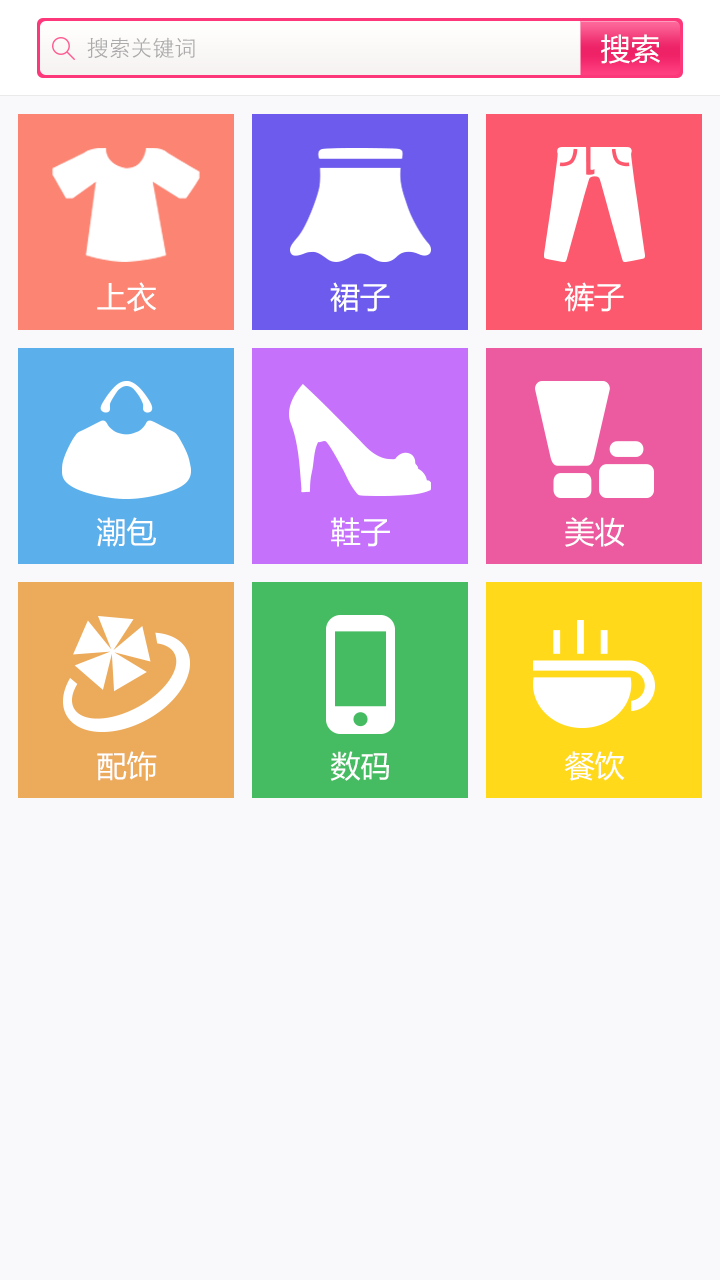
<style>
.page{position:relative;width:720px;height:1280px;background:#f9f8fb}
.page>*{position:absolute;margin:0}
.t1{font:22px "STXihei";color:#ababab}
.t2{font:30px "MicrosoftYaHei";color:#ffffff}
</style>
<div class="page">
<p class="t1" style="left:87px;top:37px;width:108px;height:21px">搜索关键词</p>
<p class="t2" style="left:601px;top:34px;width:59px;height:30px">搜索</p>
<p class="t2" style="left:97px;top:282px;width:60px;height:30px">上衣</p>
<p class="t2" style="left:330px;top:282px;width:60px;height:30px">裙子</p>
<p class="t2" style="left:564px;top:282px;width:60px;height:30px">裤子</p>
<p class="t2" style="left:96px;top:517px;width:60px;height:30px">潮包</p>
<p class="t2" style="left:331px;top:517px;width:59px;height:30px">鞋子</p>
<p class="t2" style="left:565px;top:517px;width:60px;height:30px">美妆</p>
<p class="t2" style="left:97px;top:751px;width:60px;height:30px">配饰</p>
<p class="t2" style="left:330px;top:751px;width:59px;height:30px">数码</p>
<p class="t2" style="left:564px;top:751px;width:61px;height:30px">餐饮</p>
</div>
